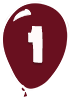
<style>
.page{position:relative;width:70px;height:100px;background:#69101f}
.page>*{position:absolute;margin:0}
.t1{font:47.5px "DizzyEdgeDEMO";letter-spacing:-0.06em;color:#fffafa;font-weight:bold}
</style>
<div class="page">
<p class="t1" style="left:28px;top:26px;width:15px;height:37px">1</p>
</div>
